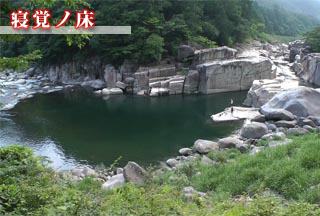
<style>
.page{position:relative;width:320px;height:216px}
.page>*{position:absolute;margin:0}
.t1{font:18px "KozMinPr6N-Heavy";letter-spacing:0.2em;color:#ffffff}
</style>
<div class="page">
<p class="t1" style="left:11px;top:10px;width:83px;height:18px">寝覚ノ床</p>
</div>
